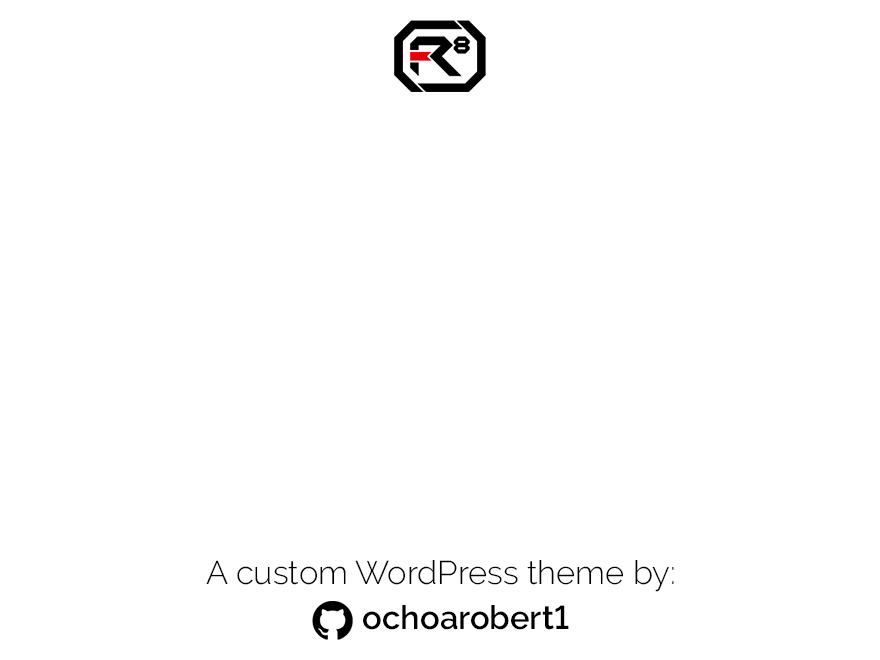
<style>
.page{position:relative;width:880px;height:660px;background:#ffffff}
.page>*{position:absolute;margin:0}
.t1{font:32.8px "Raleway-Light";color:#000000}
.t2{font:32.8px "Raleway-SemiBold";color:#000000}
</style>
<div class="page">
<p class="t1" style="left:206px;top:559px;width:468px;height:33px">A custom WordPress theme by:</p>
<p class="t2" style="left:363px;top:605px;width:206px;height:25px">ochoarobert1</p>
</div>
